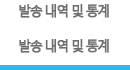
<style>
.page{position:relative;width:130px;height:70px;background:#ffffff}
.page>*{position:absolute;margin:0}
.t1{font:14px "MalgunGothicRegular";letter-spacing:-0.15em;color:#6e6e6e;font-weight:bold;scale:0.95 1}
</style>
<div class="page">
<p class="t1" style="left:19px;top:4px;width:90px;height:14px">발송 내역 및 통계</p>
<p class="t1" style="left:19px;top:39px;width:90px;height:14px">발송 내역 및 통계</p>
</div>
